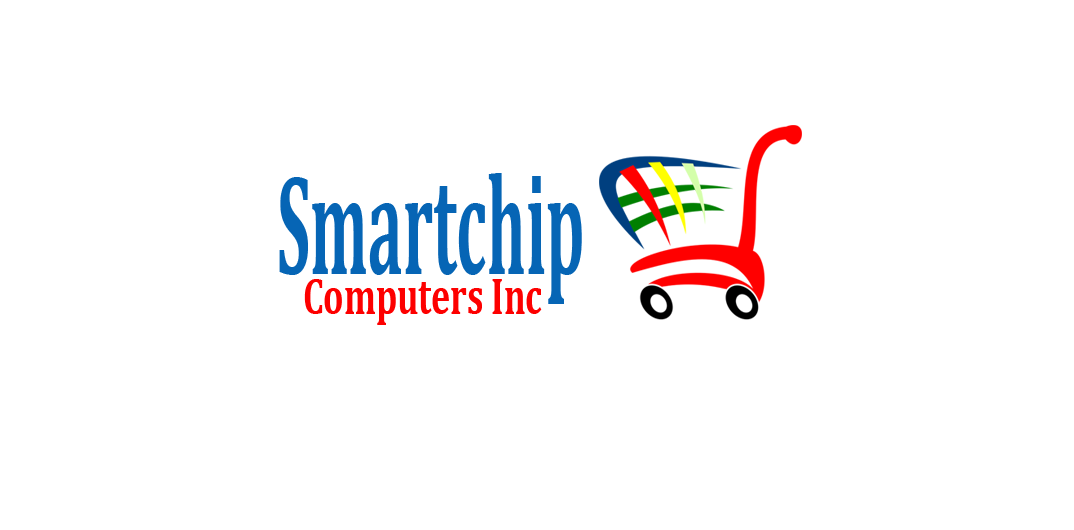
<style>
.page{position:relative;width:1074px;height:530px;background:#ffffff}
.page>*{position:absolute;margin:0}
.t1{font:144px "Cambria-Bold";color:#0665b5;scale:0.45 1}
.t2{font:52.1px "Cambria-Bold";color:#fd0000;scale:0.69 1}
</style>
<div class="page">
<p class="t1" style="left:279px;top:173px;width:303px;height:131px">Smartchip</p>
<p class="t2" style="left:304px;top:279px;width:238px;height:46px">Computers Inc</p>
</div>
